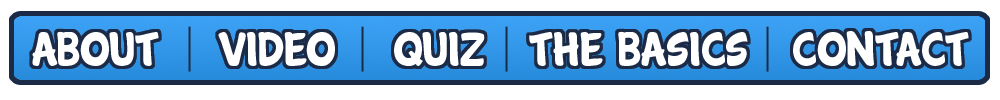
<style>
.page{position:relative;width:1000px;height:100px;background:#ffffff}
.page>*{position:absolute;margin:0}
.t1{font:49px "Cartwheel";color:#ffffff}
</style>
<div class="page">
<p class="t1" style="left:32px;top:31px;width:937px;height:35px">About    video    quiz   the basics   contact</p>
</div>
